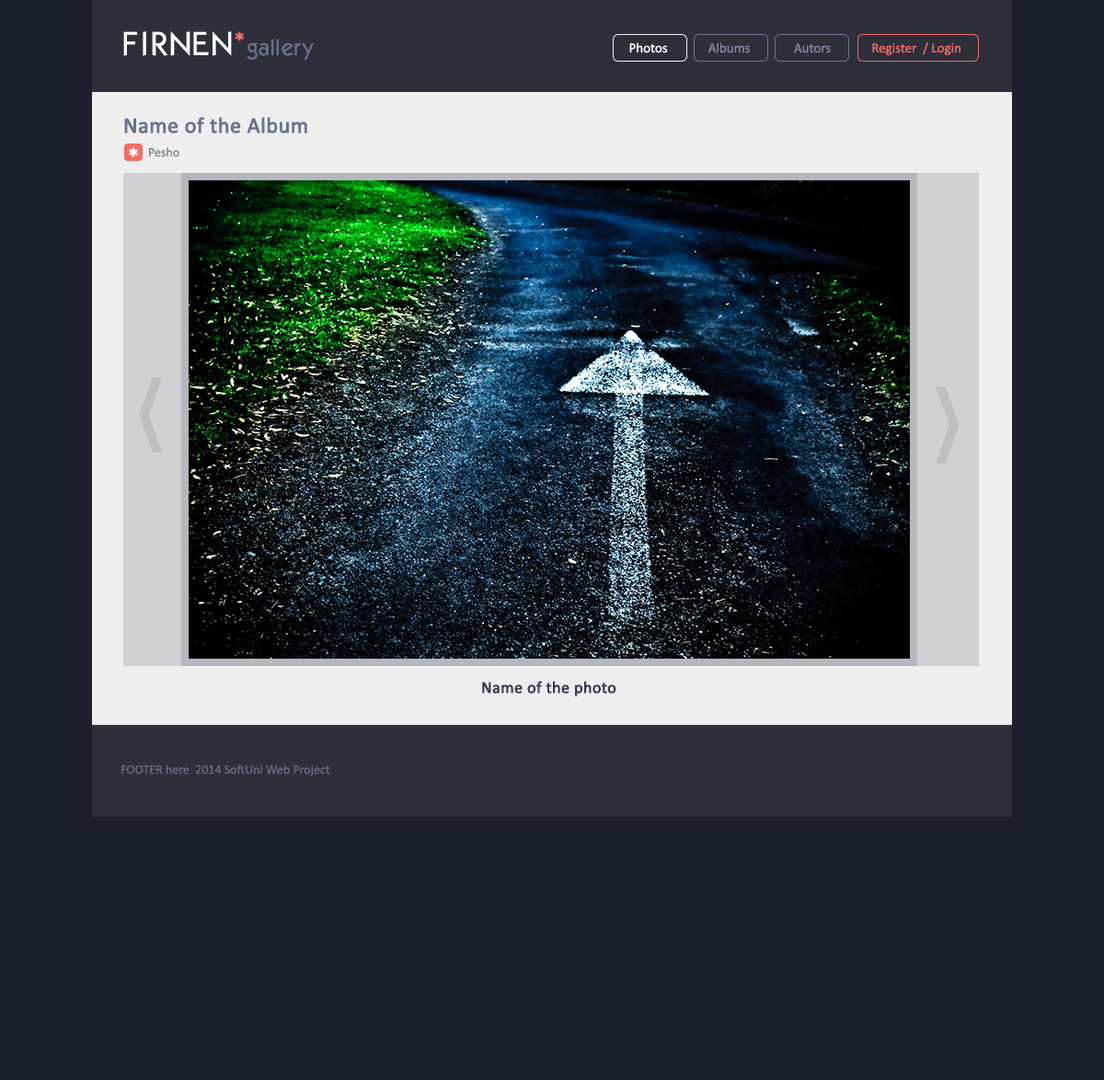
<style>
.page{position:relative;width:1104px;height:1080px;background:#1b1f2e}
.page>*{position:absolute;margin:0}
.t1{font:22.1px "Kabel";letter-spacing:0.05em;color:#6a738f}
.t2{font:33.1px "Kabel";letter-spacing:0.05em;color:#ffffff}
.t3{font:33.1px "Kabel";letter-spacing:0.075em;color:#ffffff}
.t4{font:33.1px "Kabel";letter-spacing:0.01em;color:#ffffff}
.t5{font:33.1px "Kabel";letter-spacing:0.025em;color:#ffffff}
.t6{font:33.1px "Kabel";color:#ffffff}
.t7{font:33.1px "Kabel";color:#f16c65}
.t8{font:22.1px "Kabel";color:#6a738f}
.t9{font:22.1px "Kabel";letter-spacing:-0.01em;color:#6a738f}
.t10{font:13.8px "Calibri";color:#8088a3}
.t11{font:13.8px "Calibri";color:#ffffff}
.t12{font:13.8px "Calibri";color:#f16c65}
.t13{font:22.1px "Calibri";color:#6a738f;font-weight:bold}
.t14{font:22.5px "KabelCTT-Ultra";color:#ffffff}
.t15{font:12.9px "Calibri";color:#7d7e83}
.t16{font:16.6px "Calibri";color:#353a50;font-weight:bold}
.t17{font:12.9px "Calibri";color:#676b80}
</style>
<div class="page">
<p class="t1" style="left:123px;top:31px;width:191px;height:29px"><span class="t2">F</span><span class="t3">I</span><span class="t4">R</span><span class="t5">NE</span><span class="t6">N</span><span class="t7">*</span><span class="t8">g</span>all<span class="t9">e</span><span class="t8">ry</span></p>
<p class="t10" style="left:629px;top:42px;width:331px;height:13px"><span class="t11">Photos             </span>Albums              Autors            <span class="t12"> Register  / Login</span></p>
<p class="t13" style="left:124px;top:117px;width:183px;height:16px">Name of the Album</p>
<p class="t14" style="left:129px;top:147px;width:9px;height:10px">*</p>
<p class="t15" style="left:149px;top:147px;width:30px;height:10px">Pesho</p>
<p class="t16" style="left:482px;top:681px;width:134px;height:15px">Name of the photo</p>
<p class="t17" style="left:121px;top:765px;width:209px;height:11px">FOOTER here  2014 SoftUni Web Project</p>
</div>
